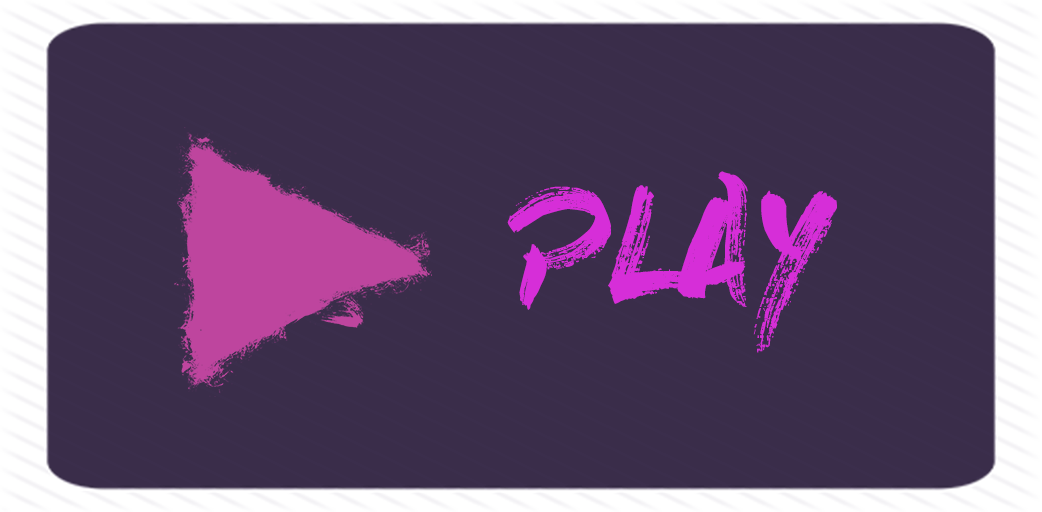
<style>
.page{position:relative;width:1042px;height:512px;background:#3a2d4a}
.page>*{position:absolute;margin:0}
.t1{font:150px "DryBrush";color:#d62ed8}
.t2{font:130px "DryBrush";color:#fefefe}
</style>
<div class="page">
<p class="t1" style="left:507px;top:171px;width:330px;height:182px"><span class="t2">                </span>PLAY</p>
</div>
